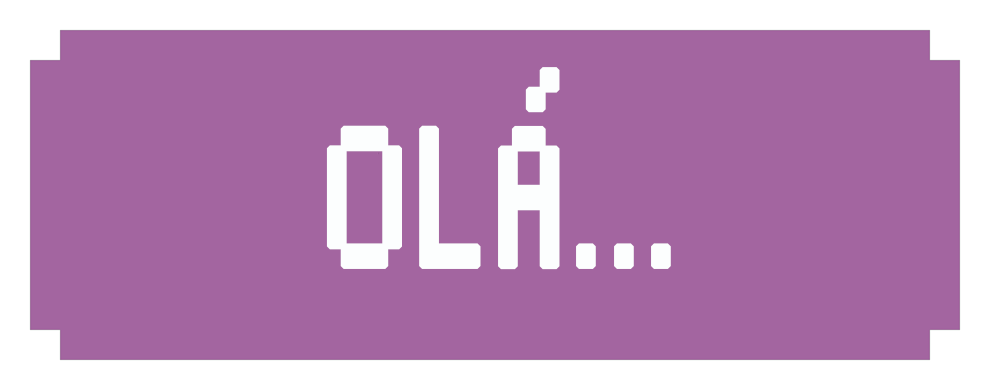
<style>
.page{position:relative;width:990px;height:390px;background:#a365a0}
.page>*{position:absolute;margin:0}
.t1{font:255px "Pixelade";letter-spacing:0.025em;color:#fcfefe;font-weight:bold;scale:0.71 1}
</style>
<div class="page">
<p class="t1" style="left:326px;top:67px;width:345px;height:203px">OLÁ...</p>
</div>
